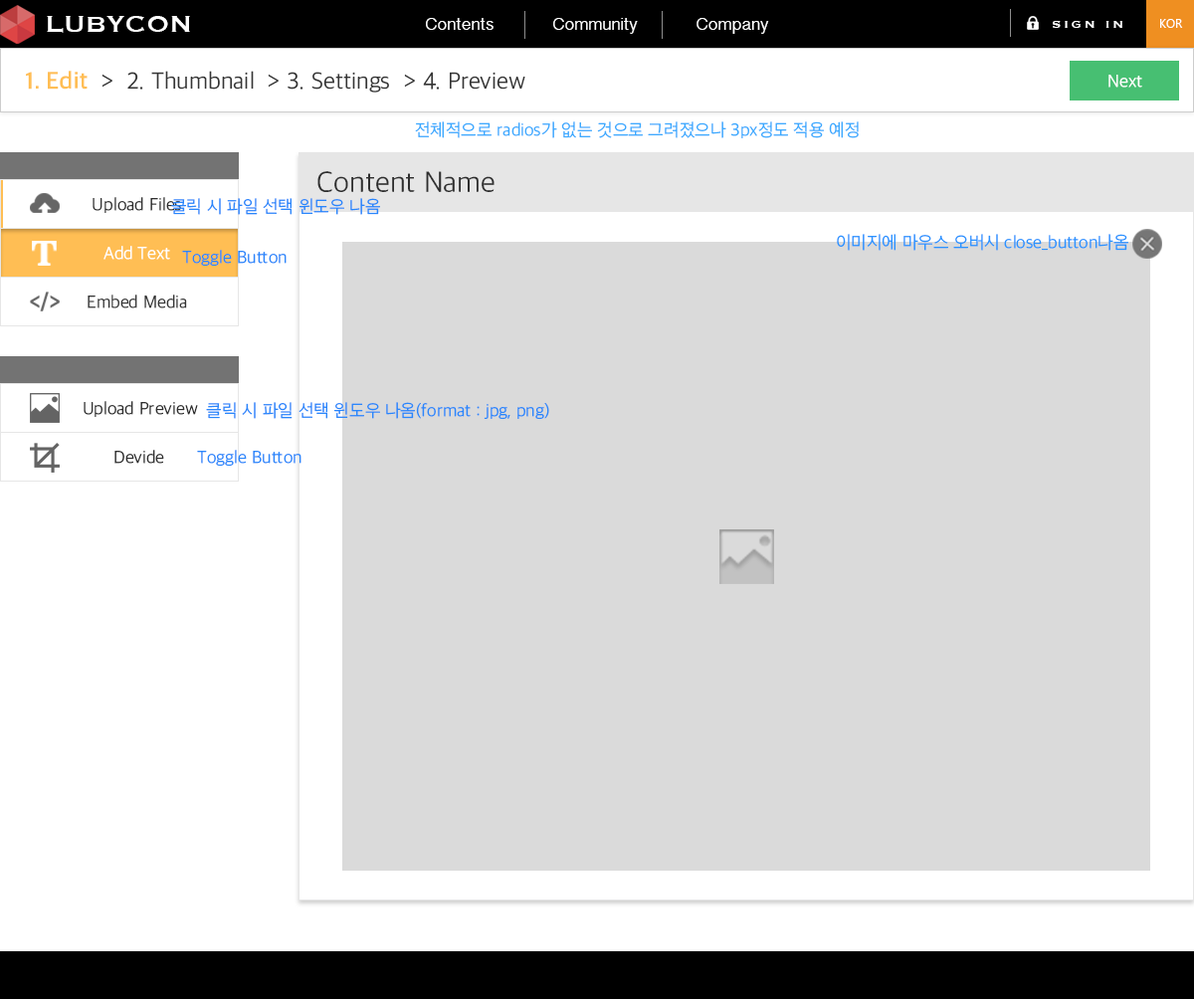
<style>
.page{position:relative;width:1194px;height:999px;background:#dadada}
.page>*{position:absolute;margin:0}
.t1{font:29.8px "Copperplate";color:#ffffff}
.t2{font:17.9px "TamilSangamMN";color:#ffffff}
.t3{font:13.9px "Copperplate";letter-spacing:0.2em;color:#ffffff}
.t4{font:11.9px "LaoUI";color:#ffffff}
.t5{font:23.9px "AppleSDGothicNeo-Light";color:#353535}
.t6{font:23.9px "AppleSDGothicNeo-Bold";color:#ffbe54}
.t7{font:17.9px "AppleSDGothicNeo-Light";color:#ffffff}
.t8{font:17.9px "AppleSDGothicNeo-Light";color:#3caaff}
.t9{font:29.8px "AppleSDGothicNeo-Light";color:#2e2e2e}
.t10{font:17.9px "AppleSDGothicNeo-Light";color:#2f2f2f}
.t11{font:17.9px "AppleSDGothicNeo-Light";color:#2987fb}
.t12{font:17.9px "AppleSDGothicNeo-Light";color:#2a93ff}
.t13{font:17.9px "AppleSDGothicNeo-Light";color:#353535}
.t14{font:17.9px "AppleSDGothicNeo-Light";color:#2e2e2e}
</style>
<div class="page">
<p class="t1" style="left:47px;top:16px;width:143px;height:17px">LUBYCON</p>
<p class="t2" style="left:426px;top:18px;width:67px;height:12px">Contents</p>
<p class="t2" style="left:553px;top:18px;width:85px;height:16px">Community</p>
<p class="t2" style="left:696px;top:18px;width:73px;height:16px">Company</p>
<p class="t3" style="left:1053px;top:21px;width:69px;height:7px">SIGN IN</p>
<p class="t4" style="left:1160px;top:19px;width:23px;height:9px">KOR</p>
<p class="t5" style="left:26px;top:71px;width:499px;height:22px"><span class="t6">1. Edit</span>  &gt;  2. Thumbnail  &gt; 3. Settings  &gt; 4. Preview</p>
<p class="t7" style="left:1108px;top:75px;width:34px;height:13px">Next</p>
<p class="t8" style="left:415px;top:121px;width:444px;height:17px">전체적으로 radios가 없는 것으로 그려졌으나 3px정도 적용 예정</p>
<p class="t9" style="left:317px;top:171px;width:177px;height:21px">Content Name</p>
<p class="t10" style="left:93px;top:197px;width:88px;height:16px">Upload Files</p>
<p class="t11" style="left:171px;top:198px;width:209px;height:17px">클릭 시 파일 선택 윈도우 나옴</p>
<p class="t12" style="left:837px;top:234px;width:291px;height:17px">이미지에 마우스 오버시 close_button나옴</p>
<p class="t7" style="left:103px;top:246px;width:67px;height:14px">Add Text</p>
<p class="t11" style="left:182px;top:250px;width:105px;height:17px">Toggle Button</p>
<p class="t13" style="left:88px;top:294px;width:99px;height:14px">Embed Media</p>
<p class="t10" style="left:84px;top:401px;width:114px;height:16px">Upload Preview</p>
<p class="t11" style="left:206px;top:402px;width:343px;height:18px">클릭 시 파일 선택 윈도우 나옴(format : jpg, png)</p>
<p class="t14" style="left:114px;top:450px;width:50px;height:14px">Devide</p>
<p class="t11" style="left:197px;top:450px;width:104px;height:17px">Toggle Button</p>
</div>
